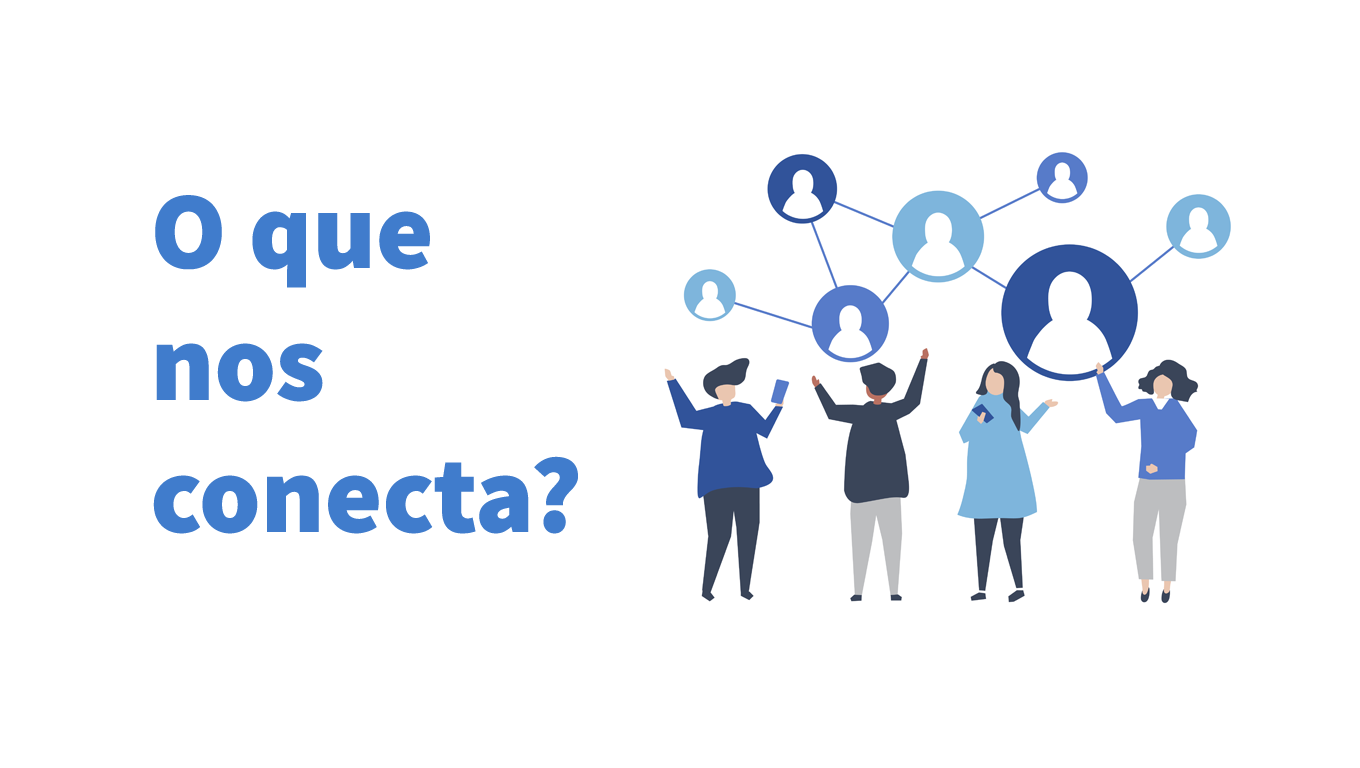
<style>
.page{position:relative;width:1360px;height:768px;background:#ffffff}
.page>*{position:absolute;margin:0}
.t1{font:110px "SourceSansPro-Black";color:#407ccc}
</style>
<div class="page">
<p class="t1" style="left:153px;top:195px;width:425px;height:339px">O que<br>nos<br>conecta?</p>
</div>
